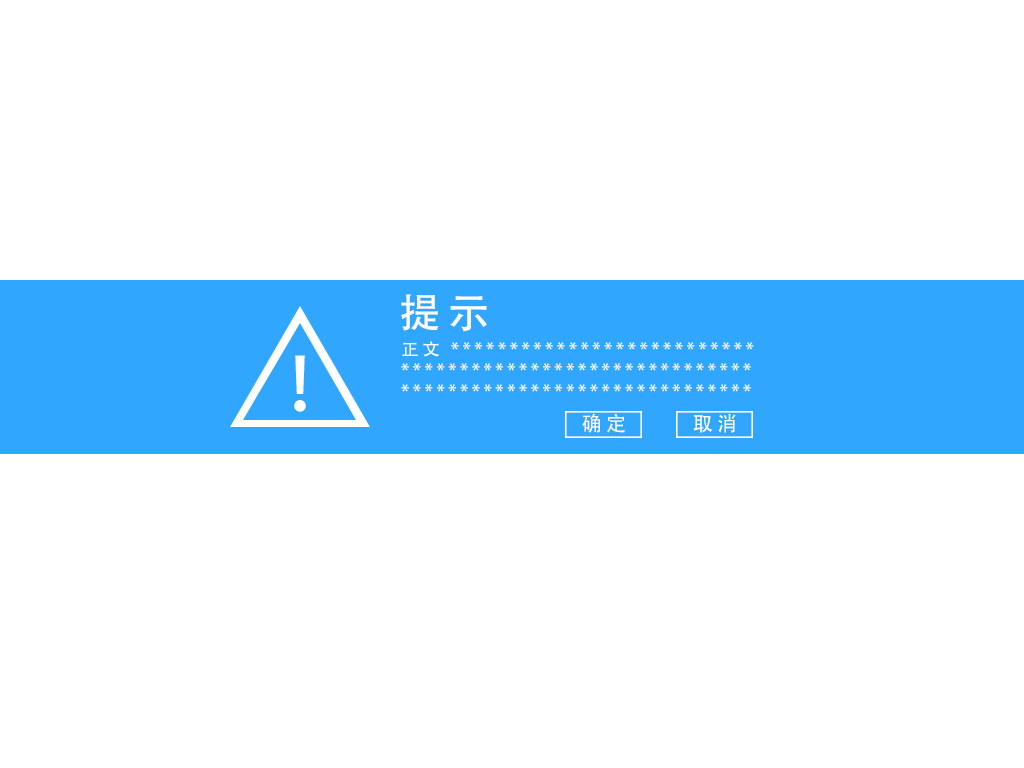
<style>
.page{position:relative;width:1024px;height:768px;background:#ffffff}
.page>*{position:absolute;margin:0}
.t1{font:41.3px "AdobeHeitiStd-Regular";letter-spacing:0.2em;color:#ffffff}
.t2{font:17.6px "AdobeHeitiStd-Regular";letter-spacing:0.2em;color:#ffffff}
.t3{font:20.5px "AdobeHeitiStd-Regular";letter-spacing:0.2em;color:#ffffff}
</style>
<div class="page">
<p class="t1" style="left:401px;top:294px;width:86px;height:38px">提示</p>
<p class="t2" style="left:401px;top:341px;width:353px;height:51px">正文 **************************<br>******************************<br>******************************</p>
<p class="t3" style="left:582px;top:413px;width:43px;height:20px">确定</p>
<p class="t3" style="left:693px;top:413px;width:43px;height:20px">取消</p>
</div>
